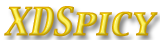
<style>
.page{position:relative;width:160px;height:40px;background:#ffffff}
.page>*{position:absolute;margin:0}
.t1{font:34px "CapitalsRegular";font-weight:bold;font-style:italic}
</style>
<div class="page">
<p class="t1" style="left:4px;top:6px;width:154px;height:31px">XDSpicy</p>
</div>
